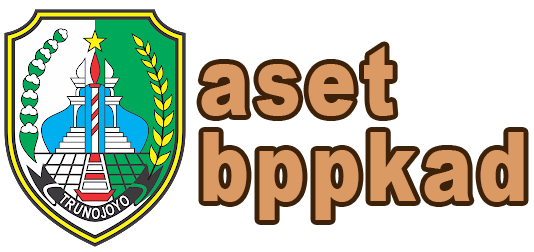
<style>
.page{position:relative;width:534px;height:252px;background:#ffffff}
.page>*{position:absolute;margin:0}
.t1{font:97.1px/86.3px "Arial-Black";letter-spacing:0.08em;color:#db9a64;scale:0.77 1}
</style>
<div class="page">
<p class="t1" style="left:201px;top:46px;width:323px;height:174px">aset<br>bppkad</p>
</div>
